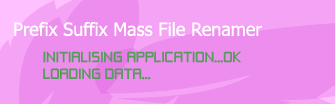
<style>
.page{position:relative;width:335px;height:104px;background:#ed8ded}
.page>*{position:absolute;margin:0}
.t1{font:18px "Tahoma";color:#ffffff}
.t2{font:14px "ZeroThrees";color:#569b5a}
</style>
<div class="page">
<p class="t1" style="left:14px;top:21px;width:248px;height:16px">Prefix Suffix Mass File Renamer</p>
<p class="t2" style="left:43px;top:51px;width:198px;height:29px">INITIALISING APPLICATION...OK<br>LOADING DATA...</p>
</div>
